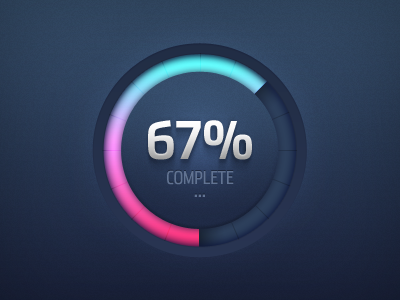
<style>
.page{position:relative;width:400px;height:300px}
.page>*{position:absolute;margin:0}
.t1{font:52px "StainlessCond-Bold"}
.t2{font:18px "StainlessComp-Regular";color:#617392;text-transform:uppercase}
.t3{font:19px "StainlessComp-Regular";color:#617392;text-transform:uppercase}
</style>
<div class="page">
<p class="t1" style="left:148px;top:120px;width:104px;height:40px">67%</p>
<p class="t2" style="left:167px;top:170px;width:67px;height:15px">complete</p>
<p class="t3" style="left:194px;top:194px;width:11px;height:3px">...</p>
</div>
